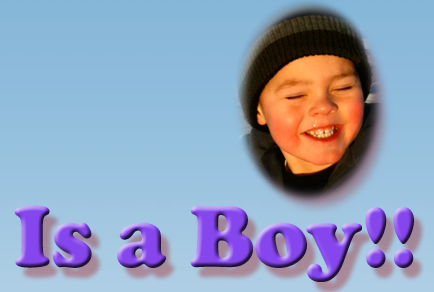
<style>
.page{position:relative;width:434px;height:292px}
.page>*{position:absolute;margin:0}
.t1{font:90px "CooperBlack"}
</style>
<div class="page">
<p class="t1" style="left:14px;top:205px;width:400px;height:77px">Is a Boy!!</p>
</div>
